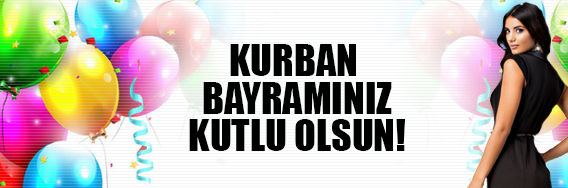
<style>
.page{position:relative;width:568px;height:188px}
.page>*{position:absolute;margin:0}
.t1{font:40px/37.5px "Impact";color:#000000;text-transform:uppercase}
</style>
<div class="page">
<p class="t1" style="left:189px;top:44px;width:217px;height:107px;text-align:center">kurban <br>bayraminiz<br>kutlu olsun!</p>
</div>
